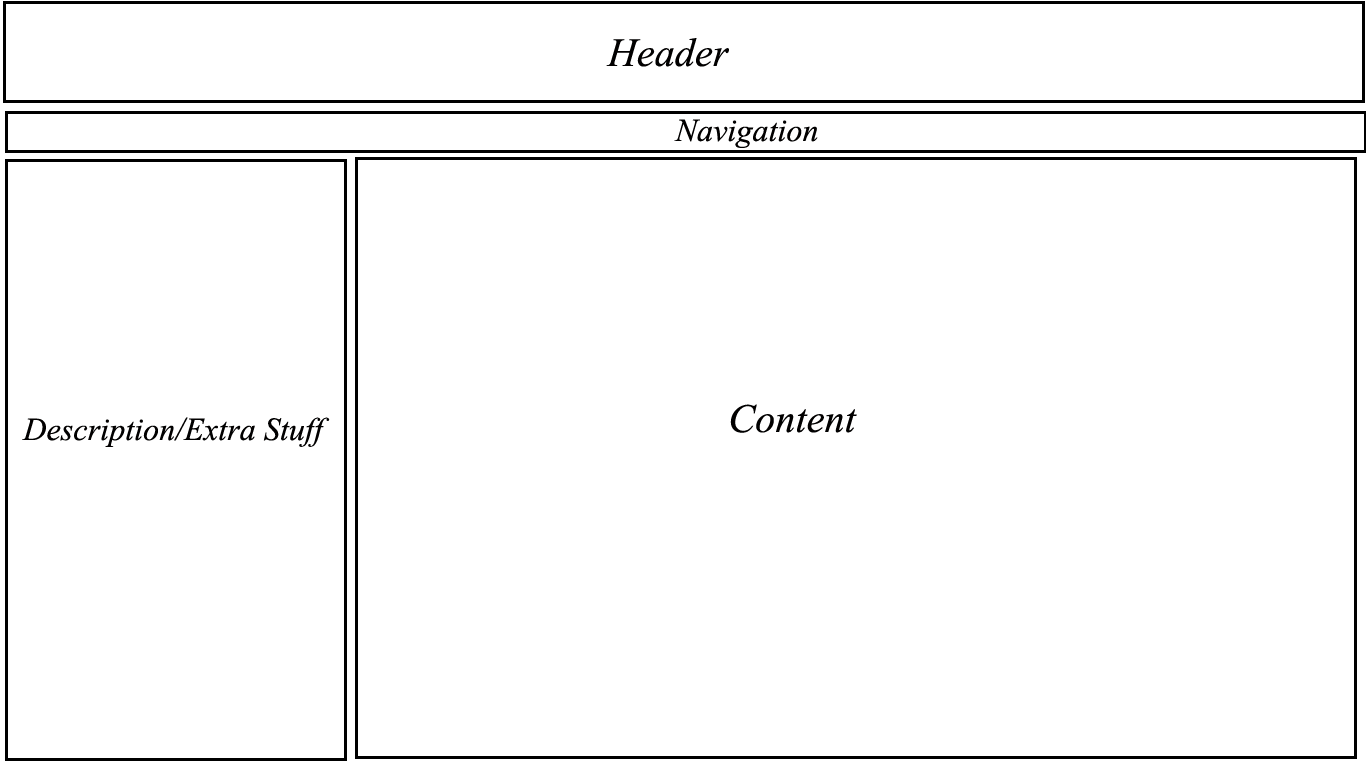
<style>
.page{position:relative;width:1366px;height:768px;background:#ffffff}
.page>*{position:absolute;margin:0}
.t1{font:50px "Vijaya";color:#010000}
.t2{font:40px "Vijaya";color:#010000}
</style>
<div class="page">
<p class="t1" style="left:606px;top:38px;width:123px;height:29px">Header</p>
<p class="t2" style="left:674px;top:119px;width:144px;height:29px">Navigation</p>
<p class="t1" style="left:730px;top:404px;width:127px;height:29px">Content</p>
<p class="t2" style="left:22px;top:417px;width:308px;height:30px">Description/Extra Stuff</p>
</div>
